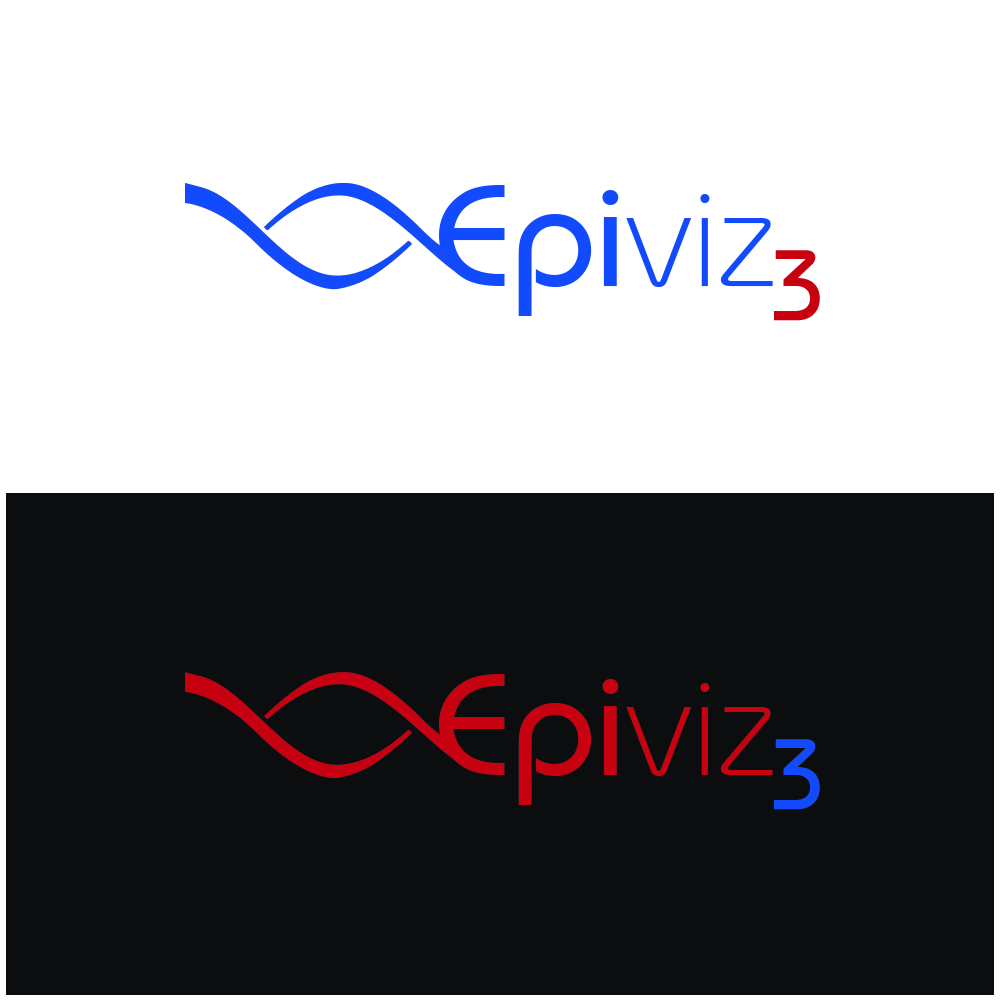
<style>
.page{position:relative;width:1000px;height:1000px;background:#ffffff}
.page>*{position:absolute;margin:0}
.t1{font:143.8px "BauhausITCbyBT-Medium";color:#124afe;scale:1.05 1}
.t2{font:143.8px "BauhausITCbyBT-Light";color:#124afe;scale:1.05 1}
.t3{font:100px "BauhausITCbyBT-Medium";color:#c70110}
.t4{font:143.8px "BauhausITCbyBT-Medium";color:#c70110;scale:1.05 1}
.t5{font:143.8px "BauhausITCbyBT-Light";color:#c70110;scale:1.05 1}
.t6{font:100px "BauhausITCbyBT-Medium";color:#134bfc}
</style>
<div class="page">
<p class="t1" style="left:439px;top:185px;width:334px;height:131px">Epi<span class="t2">viz</span></p>
<p class="t3" style="left:774px;top:250px;width:46px;height:71px">3</p>
<p class="t4" style="left:439px;top:674px;width:334px;height:131px">Epi<span class="t5">viz</span></p>
<p class="t6" style="left:774px;top:739px;width:46px;height:71px">3</p>
</div>
